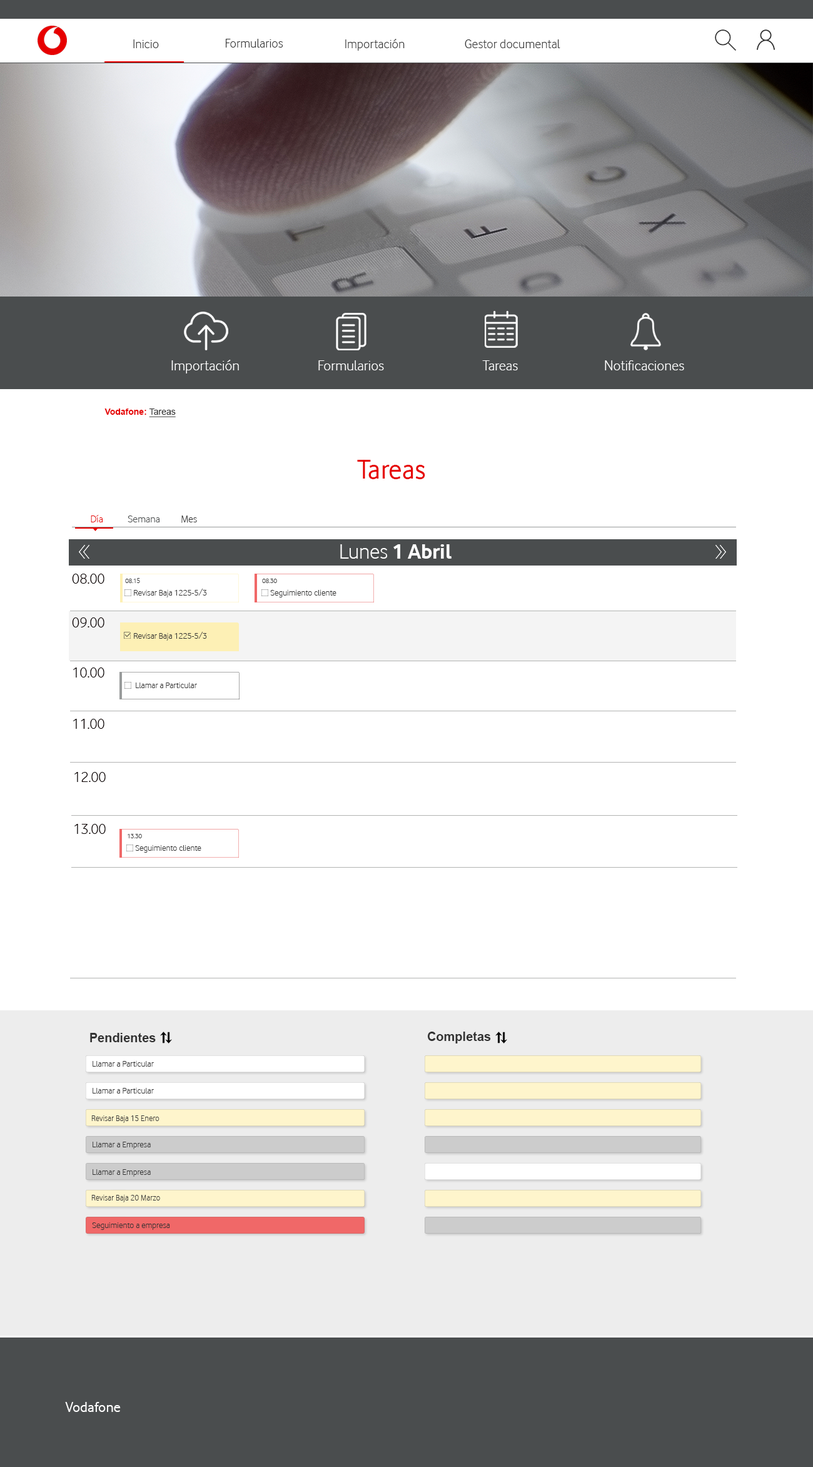
<style>
.page{position:relative;width:813px;height:1467px;background:#ffffff}
.page>*{position:absolute;margin:0}
.t1{font:13.1px "VodafoneLt-Regular";color:#333333}
.t2{font:15px "VodafoneLt-Regular";color:#ffffff}
.t3{font:8.8px "Arial-BoldMT";color:#e60000}
.t4{font:8.8px "ArialMT";color:#333333;text-decoration:underline}
.t5{font:28.1px "VodafoneRg-Regular";color:#e60000}
.t6{font:10.5px "VodafoneLt-Regular";color:#e60000}
.t7{font:10.5px "VodafoneLt-Regular";color:#4a4d4e}
.t8{font:10.5px "VodafoneLt-Regular";color:#333333}
.t9{font:21.6px "VodafoneRg-Bold";color:#ffffff}
.t10{font:21.6px "VodafoneLt-Regular";color:#ffffff}
.t11{font:15.1px "VodafoneLt-Regular";color:#0d0101}
.t12{font:6.9px "VodafoneLt-Regular";color:#333333}
.t13{font:8.8px "VodafoneLt-Regular";color:#333333}
.t14{font:12.5px "Arial-BoldMT";color:#333333}
.t15{font:8.8px "VodafoneLt-Regular";color:#333333;scale:0.96 1}
.t16{font:15px "VodafoneRg-Regular";color:#ffffff}
</style>
<div class="page">
<p class="t1" style="left:133px;top:39px;width:26px;height:9px">Inicio</p>
<p class="t1" style="left:226px;top:39px;width:57px;height:9px">Formularios</p>
<p class="t1" style="left:345px;top:39px;width:60px;height:12px">Importación</p>
<p class="t1" style="left:465px;top:39px;width:95px;height:9px">Gestor documental</p>
<p class="t2" style="left:171px;top:360px;width:68px;height:13px">Importación</p>
<p class="t2" style="left:318px;top:360px;width:66px;height:10px">Formularios</p>
<p class="t2" style="left:482px;top:360px;width:36px;height:10px">Tareas</p>
<p class="t2" style="left:605px;top:360px;width:79px;height:10px">Notificaciones</p>
<p class="t3" style="left:104px;top:408px;width:72px;height:9px">Vodafone: <span class="t4">Tareas</span></p>
<p class="t5" style="left:357px;top:460px;width:68px;height:19px">Tareas</p>
<p class="t6" style="left:91px;top:515px;width:12px;height:7px">Día</p>
<p class="t7" style="left:128px;top:515px;width:31px;height:7px">Semana</p>
<p class="t8" style="left:181px;top:515px;width:16px;height:8px">Mes</p>
<p class="t9" style="left:340px;top:544px;width:112px;height:15px"><span class="t10">Lunes </span>1 Abril</p>
<p class="t11" style="left:72px;top:574px;width:32px;height:10px">08.00</p>
<p class="t12" style="left:125px;top:578px;width:15px;height:5px">08.15</p>
<p class="t12" style="left:262px;top:579px;width:15px;height:4px">08.30</p>
<p class="t13" style="left:134px;top:589px;width:73px;height:8px">Revisar Baja 1225-5/3</p>
<p class="t13" style="left:270px;top:590px;width:66px;height:7px">Seguimiento cliente</p>
<p class="t11" style="left:72px;top:617px;width:32px;height:10px">09.00</p>
<p class="t13" style="left:134px;top:632px;width:73px;height:8px">Revisar Baja 1225-5/3</p>
<p class="t11" style="left:73px;top:667px;width:31px;height:10px">10.00</p>
<p class="t13" style="left:136px;top:682px;width:61px;height:6px">Llamar a Particular</p>
<p class="t11" style="left:73px;top:719px;width:31px;height:10px">11.00</p>
<p class="t11" style="left:74px;top:772px;width:32px;height:10px">12.00</p>
<p class="t11" style="left:74px;top:824px;width:32px;height:10px">13.00</p>
<p class="t12" style="left:128px;top:834px;width:14px;height:4px">13.30</p>
<p class="t13" style="left:135px;top:845px;width:66px;height:7px">Seguimiento cliente</p>
<p class="t14" style="left:90px;top:1033px;width:66px;height:9px">Pendientes</p>
<p class="t14" style="left:428px;top:1031px;width:63px;height:12px">Completas</p>
<p class="t13" style="left:93px;top:1061px;width:61px;height:5px">Llamar a Particular</p>
<p class="t13" style="left:93px;top:1088px;width:61px;height:5px">Llamar a Particular</p>
<p class="t15" style="left:91px;top:1115px;width:68px;height:8px">Revisar Baja 15 Enero</p>
<p class="t13" style="left:93px;top:1141px;width:58px;height:8px">Llamar a Empresa</p>
<p class="t13" style="left:93px;top:1169px;width:58px;height:7px">Llamar a Empresa</p>
<p class="t15" style="left:91px;top:1195px;width:69px;height:7px">Revisar Baja 20 Marzo</p>
<p class="t13" style="left:92px;top:1222px;width:78px;height:8px">Seguimiento a empresa</p>
<p class="t16" style="left:65px;top:1402px;width:56px;height:10px">Vodafone</p>
</div>
